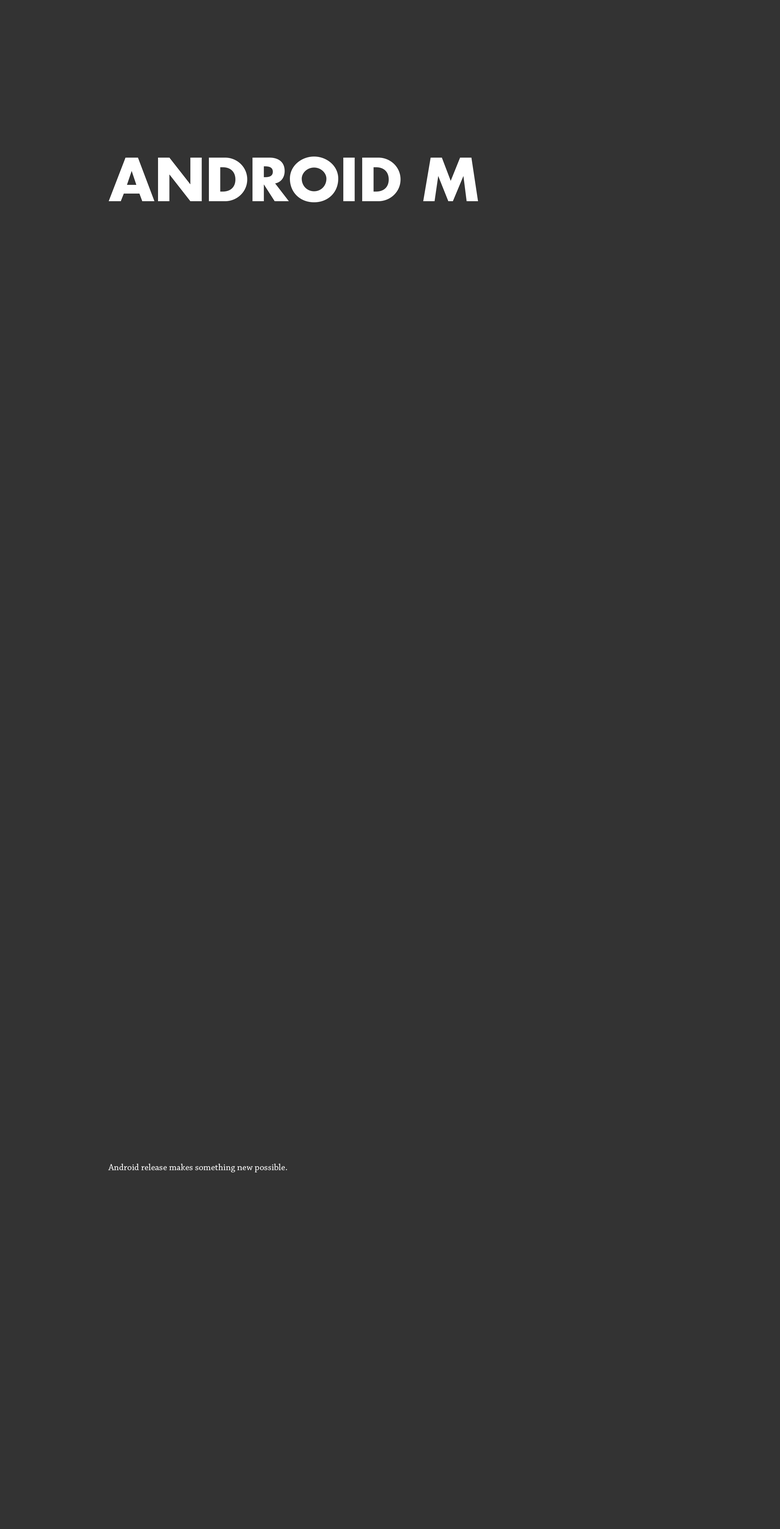
<style>
.page{position:relative;width:780px;height:1529px;background:#333333}
.page>*{position:absolute;margin:0}
.t1{font:57.9px "FuturaStd-Bold";color:#ffffff}
.t2{font:9.1px "ChaparralPro-Regular";letter-spacing:0.005em;color:#ffffff}
</style>
<div class="page">
<p class="t1" style="left:109px;top:157px;width:369px;height:45px">ANDROID M</p>
<p class="t2" style="left:108px;top:1164px;width:179px;height:8px">Android release makes something new possible.</p>
</div>
